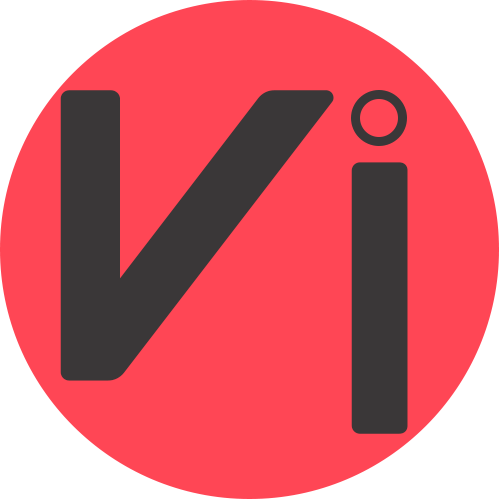
<style>
.page{position:relative;width:500px;height:500px;background:#ff4655}
.page>*{position:absolute;margin:0}
.t1{font:404px "VALORANT-Regular";letter-spacing:0.01em;color:#3a3738;font-weight:bold}
.t2{font:376.6px "VALORANT-Regular";letter-spacing:0.01em;color:#3a3738;font-weight:bold}
</style>
<div class="page">
<p class="t1" style="left:60px;top:90px;width:274px;height:291px">v</p>
<p class="t2" style="left:351px;top:162px;width:57px;height:272px">i</p>
</div>
